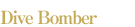
<style>
.page{position:relative;width:135px;height:27px;background:#ffffff}
.page>*{position:absolute;margin:0}
.t1{font:18px "RyuminPro-ExBold";letter-spacing:-0.08em;color:#c4a956}
</style>
<div class="page">
<p class="t1" style="left:0px;top:10px;width:97px;height:15px">Dive Bomber</p>
</div>
